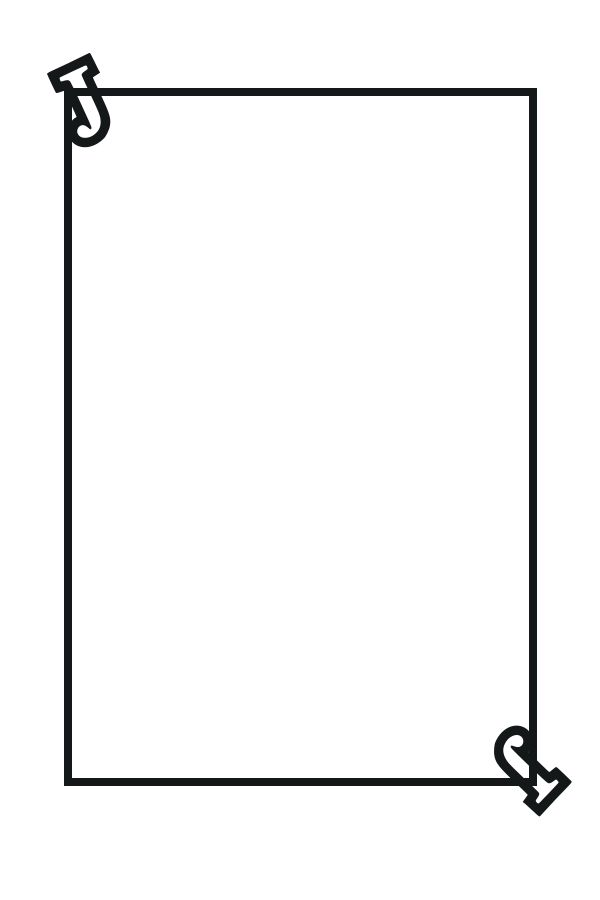
<style>
.page{position:relative;width:600px;height:900px;background:#ffffff}
.page>*{position:absolute;margin:0}
.t1{font:112.8px "Persona5MenuFontPrototype-Rg";color:#151819}
</style>
<div class="page">
<p class="t1" style="left:47px;top:53px;width:64px;height:95px">J</p>
<p class="t1" style="left:494px;top:725px;width:78px;height:92px;rotate:159deg">J</p>
</div>
